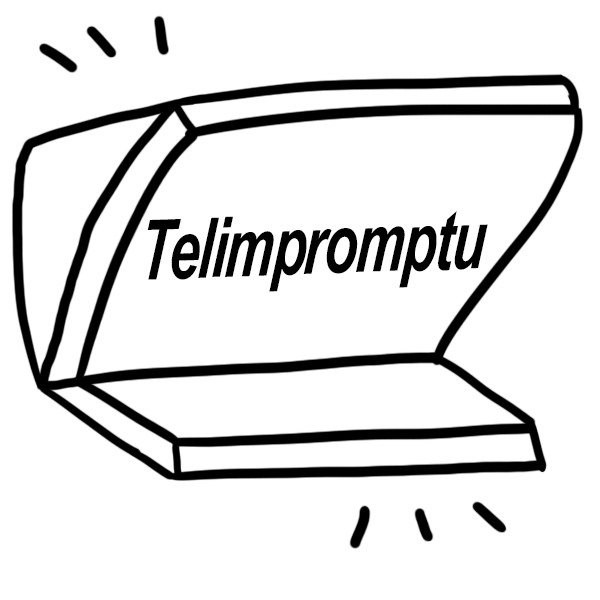
<style>
.page{position:relative;width:600px;height:600px;background:#ffffff}
.page>*{position:absolute;margin:0}
.t1{font:83.3px "Arial-BoldItalicMT";letter-spacing:-0.03em;color:#000000;font-style:italic;scale:0.66 1}
</style>
<div class="page">
<p class="t1" style="left:147px;top:211px;width:341px;height:81px;rotate:-2deg">Telimpromptu</p>
</div>
